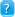
<style>
.page{position:relative;width:15px;height:17px}
.page>*{position:absolute;margin:0}
.t1{font:12px "MicrosoftYaHei";color:#ffffff}
</style>
<div class="page">
<p class="t1" style="left:4px;top:3px;width:5px;height:10px">?</p>
</div>
